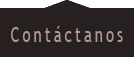
<style>
.page{position:relative;width:134px;height:57px;background:#262020}
.page>*{position:absolute;margin:0}
.t1{font:21px "TrebuchetMS";letter-spacing:0.2em;color:#b29696;scale:0.71 1}
</style>
<div class="page">
<p class="t1" style="left:11px;top:26px;width:112px;height:16px">Contáctanos</p>
</div>
